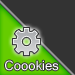
<style>
.page{position:relative;width:75px;height:75px;background:#333333}
.page>*{position:absolute;margin:0}
.t1{font:12.5px "Mangal";color:#ffffff}
</style>
<div class="page">
<p class="t1" style="left:5px;top:60px;width:54px;height:11px">Coookies</p>
</div>
